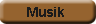
<style>
.page{position:relative;width:96px;height:24px;background:#95632f}
.page>*{position:absolute;margin:0}
.t1{font:13.5px "Arial-BoldMT";color:#1b1b1b}
</style>
<div class="page">
<p class="t1" style="left:27px;top:7px;width:37px;height:10px">Musik</p>
</div>
